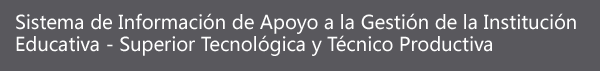
<style>
.page{position:relative;width:600px;height:71px;background:#59585d}
.page>*{position:absolute;margin:0}
.t1{font:18.7px "MicrosoftYaHeiUI";color:#ffffff}
</style>
<div class="page">
<p class="t1" style="left:16px;top:13px;width:560px;height:43px">Sistema de Información de Apoyo a la Gestión de la Institución <br>Educativa - Superior Tecnológica y Técnico Productiva</p>
</div>
